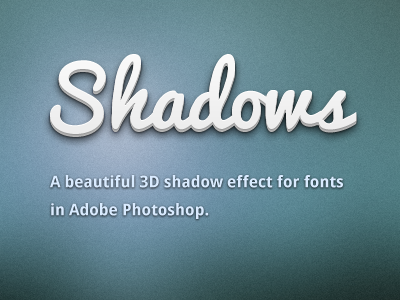
<style>
.page{position:relative;width:400px;height:300px}
.page>*{position:absolute;margin:0}
.t1{font:80px "Pacifico";color:#f9f9f9}
.t2{font:80px "Pacifico";color:#efefef}
.t3{font:80px "Pacifico";color:#f0f0f0}
.t4{font:16px/28px "DroidSans-Bold";color:#d9ebff}
</style>
<div class="page">
<p class="t1" style="left:50px;top:54px;width:307px;height:80px">Shadows</p>
<p class="t2" style="left:50px;top:57px;width:307px;height:80px">Shadows</p>
<p class="t3" style="left:50px;top:56px;width:307px;height:80px">Shadows</p>
<p class="t3" style="left:50px;top:55px;width:307px;height:80px">Shadows</p>
<p class="t4" style="left:50px;top:175px;width:293px;height:44px">A beautiful 3D shadow effect for fonts in Adobe Photoshop.</p>
</div>
